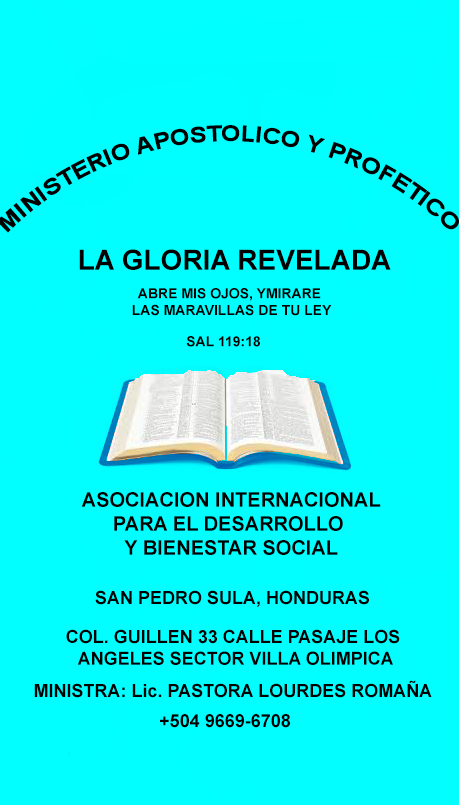
<style>
.page{position:relative;width:459px;height:805px;background:#02ffff}
.page>*{position:absolute;margin:0}
.t1{font:28px "Arial-BoldMT";color:#000000}
.t2{font:14px "Arial-BoldMT";color:#000000}
.t3{font:20px "Arial-BoldMT";color:#000000}
.t4{font:18px "Arial-BoldMT";color:#000000}
</style>
<div class="page">
<p class="t1" style="left:79px;top:249px;width:312px;height:21px">LA GLORIA REVELADA</p>
<p class="t2" style="left:132px;top:288px;width:200px;height:28px;text-align:center">ABRE MIS OJOS, YMIRARE<br> LAS MARAVILLAS DE TU LEY</p>
<p class="t2" style="left:186px;top:336px;width:74px;height:11px">SAL 119:18</p>
<p class="t3" style="left:81px;top:492px;width:300px;height:63px;text-align:center">ASOCIACION INTERNACIONAL<br>PARA EL DESARROLLO <br>Y BIENESTAR SOCIAL</p>
<p class="t4" style="left:95px;top:590px;width:274px;height:17px">SAN PEDRO SULA, HONDURAS</p>
<p class="t4" style="left:66px;top:629px;width:334px;height:36px;text-align:center">COL. GUILLEN 33 CALLE PASAJE LOS <br>ANGELES SECTOR VILLA OLIMPICA</p>
<p class="t4" style="left:34px;top:680px;width:398px;height:18px">MINISTRA: Lic. PASTORA LOURDES ROMAÑA</p>
<p class="t4" style="left:160px;top:714px;width:130px;height:14px">+504 9669-6708</p>
</div>
